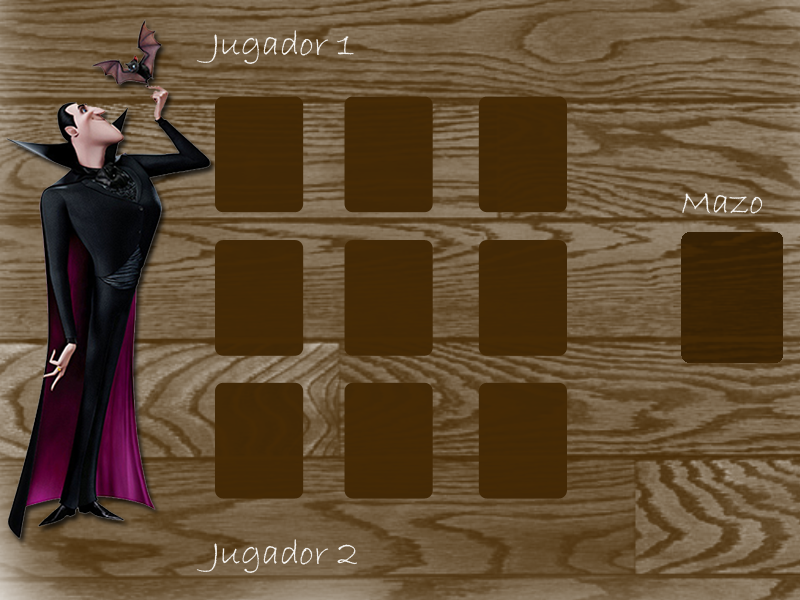
<style>
.page{position:relative;width:800px;height:600px}
.page>*{position:absolute;margin:0}
.t1{font:36px "BradleyHandITC";color:#f6f5f3}
</style>
<div class="page">
<p class="t1" style="left:196px;top:30px;width:158px;height:34px">Jugador 1</p>
<p class="t1" style="left:682px;top:193px;width:81px;height:21px">Mazo</p>
<p class="t1" style="left:196px;top:539px;width:161px;height:34px">Jugador 2</p>
</div>
